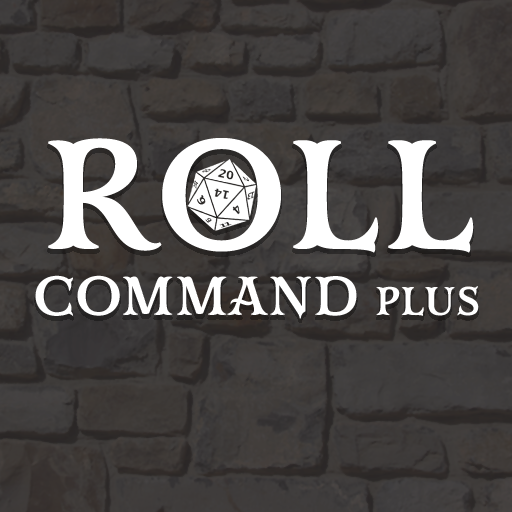
<style>
.page{position:relative;width:512px;height:512px}
.page>*{position:absolute;margin:0}
.t1{font:55px "MrDarcy-Bol";color:#ffffff}
.t2{font:155px "MrDarcy-Bol";color:#ffffff}
.t3{font:40px "MrDarcy-Bol";color:#ffffff}
</style>
<div class="page">
<p class="t1" style="left:35px;top:138px;width:444px;height:181px"><span class="t2">ROLL </span>COMMAND <span class="t3">PLUS</span></p>
</div>
